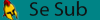
<style>
.page{position:relative;width:100px;height:20px;background:#008486}
.page>*{position:absolute;margin:0}
.t1{font:20.8px "MyriadPro-Regular";color:#101413}
</style>
<div class="page">
<p class="t1" style="left:29px;top:1px;width:58px;height:15px">Se Sub</p>
</div>
